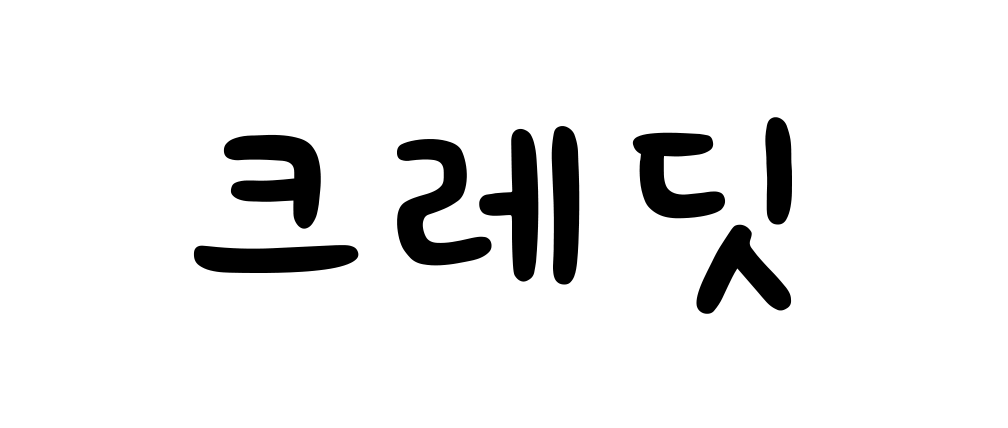
<style>
.page{position:relative;width:1008px;height:428px;background:#ffffff}
.page>*{position:absolute;margin:0}
.t1{font:250px "godoMaum";letter-spacing:0.1em;color:#000000}
</style>
<div class="page">
<p class="t1" style="left:193px;top:117px;width:599px;height:197px">크레딧</p>
</div>
